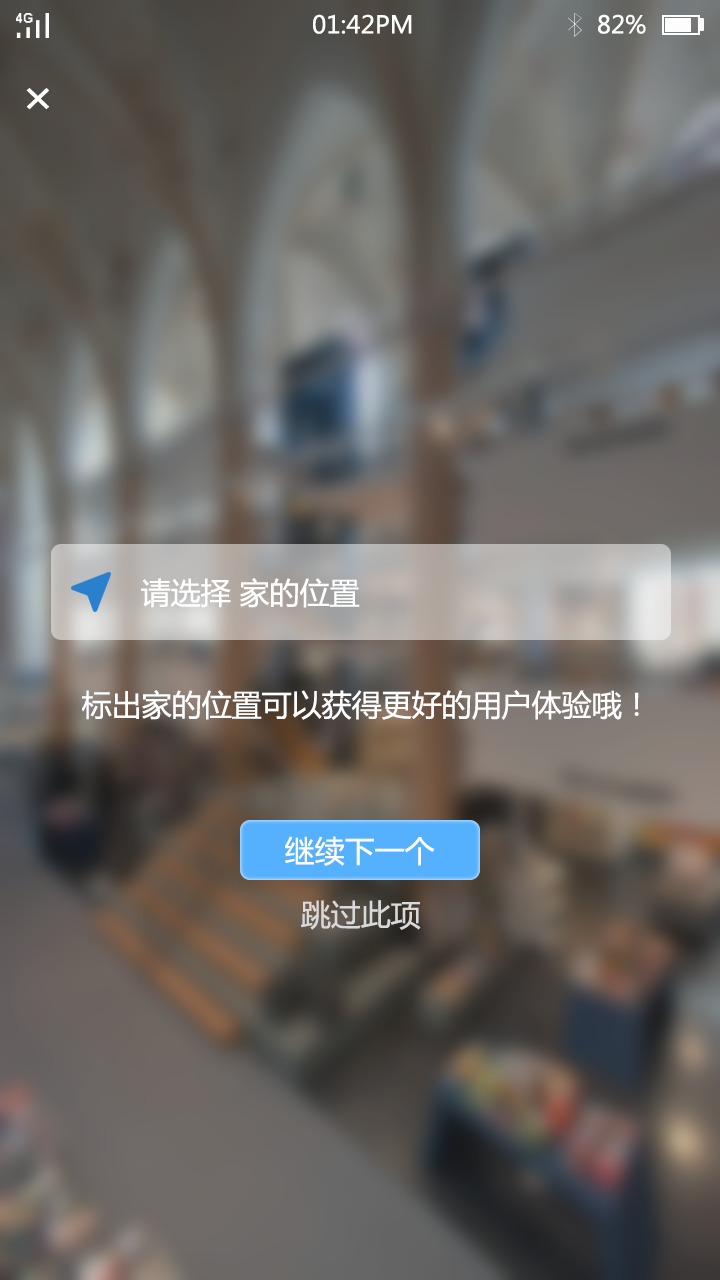
<style>
.page{position:relative;width:720px;height:1280px}
.page>*{position:absolute;margin:0}
.t1{font:24px "MicrosoftYaHei";color:#fbfdfc}
.t2{font:45.2px "MicrosoftYaHei";color:#ffffff;scale:1.05 1}
.t3{font:30px "MicrosoftYaHei";color:#ffffff}
.t4{font:30px "MicrosoftYaHei";color:#d9d9d9}
</style>
<div class="page">
<p class="t1" style="left:313px;top:14px;width:99px;height:20px">01:42PM</p>
<p class="t1" style="left:598px;top:14px;width:48px;height:20px">82%</p>
<p class="t2" style="left:26px;top:88px;width:23px;height:22px">×</p>
<p class="t3" style="left:141px;top:578px;width:219px;height:30px">请选择 家的位置</p>
<p class="t3" style="left:82px;top:690px;width:557px;height:30px">标出家的位置可以获得更好的用户体验哦！</p>
<p class="t3" style="left:285px;top:836px;width:150px;height:30px">继续下一个</p>
<p class="t4" style="left:301px;top:900px;width:120px;height:30px">跳过此项</p>
</div>
